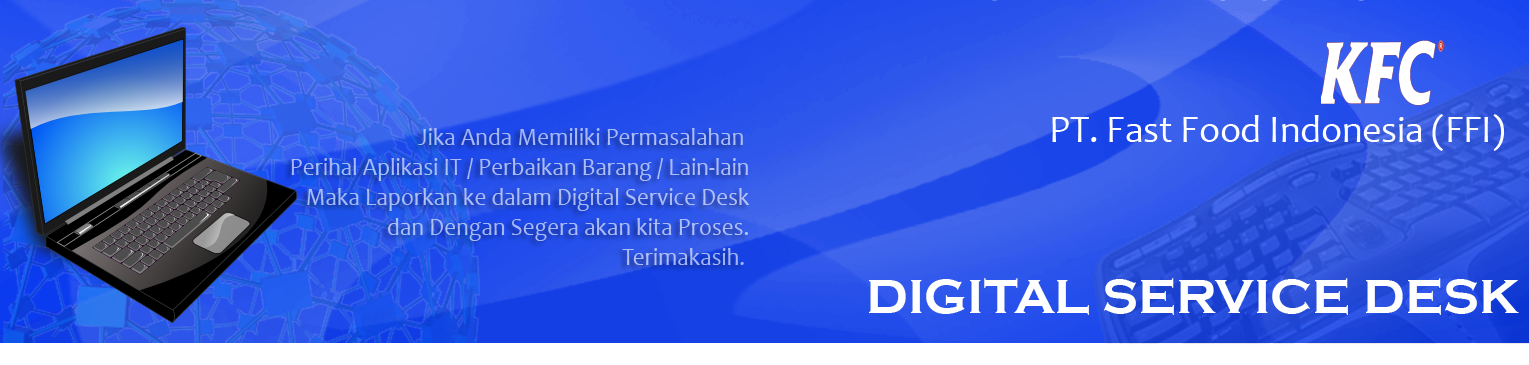
<style>
.page{position:relative;width:1529px;height:365px}
.page>*{position:absolute;margin:0}
.t1{font:37.5px "Candara";color:#fdfdff}
.t2{font:25px "Candara";color:#aabcf7;scale:0.94 1}
.t3{font:21.2px "Candara";color:#aabcf7;scale:0.94 1}
.t4{font:50px "CopperplateGothic-Bold";color:#ffffff}
</style>
<div class="page">
<p class="t1" style="left:1052px;top:114px;width:452px;height:37px">PT. Fast Food Indonesia (FFI)</p>
<p class="t2" style="left:291px;top:128px;width:458px;height:137px;text-align:right"><span class="t3"><br></span>Jika Anda Memiliki Permasalahan <br>Perihal Aplikasi IT / Perbaikan Barang / Lain-lain<br>Maka Laporkan ke dalam Digital Service Desk<br>dan Dengan Segera akan kita Proses.<br>Terimakasih.</p>
<p class="t4" style="left:869px;top:278px;width:650px;height:37px">DIGITAL SERVICE DESK</p>
</div>
